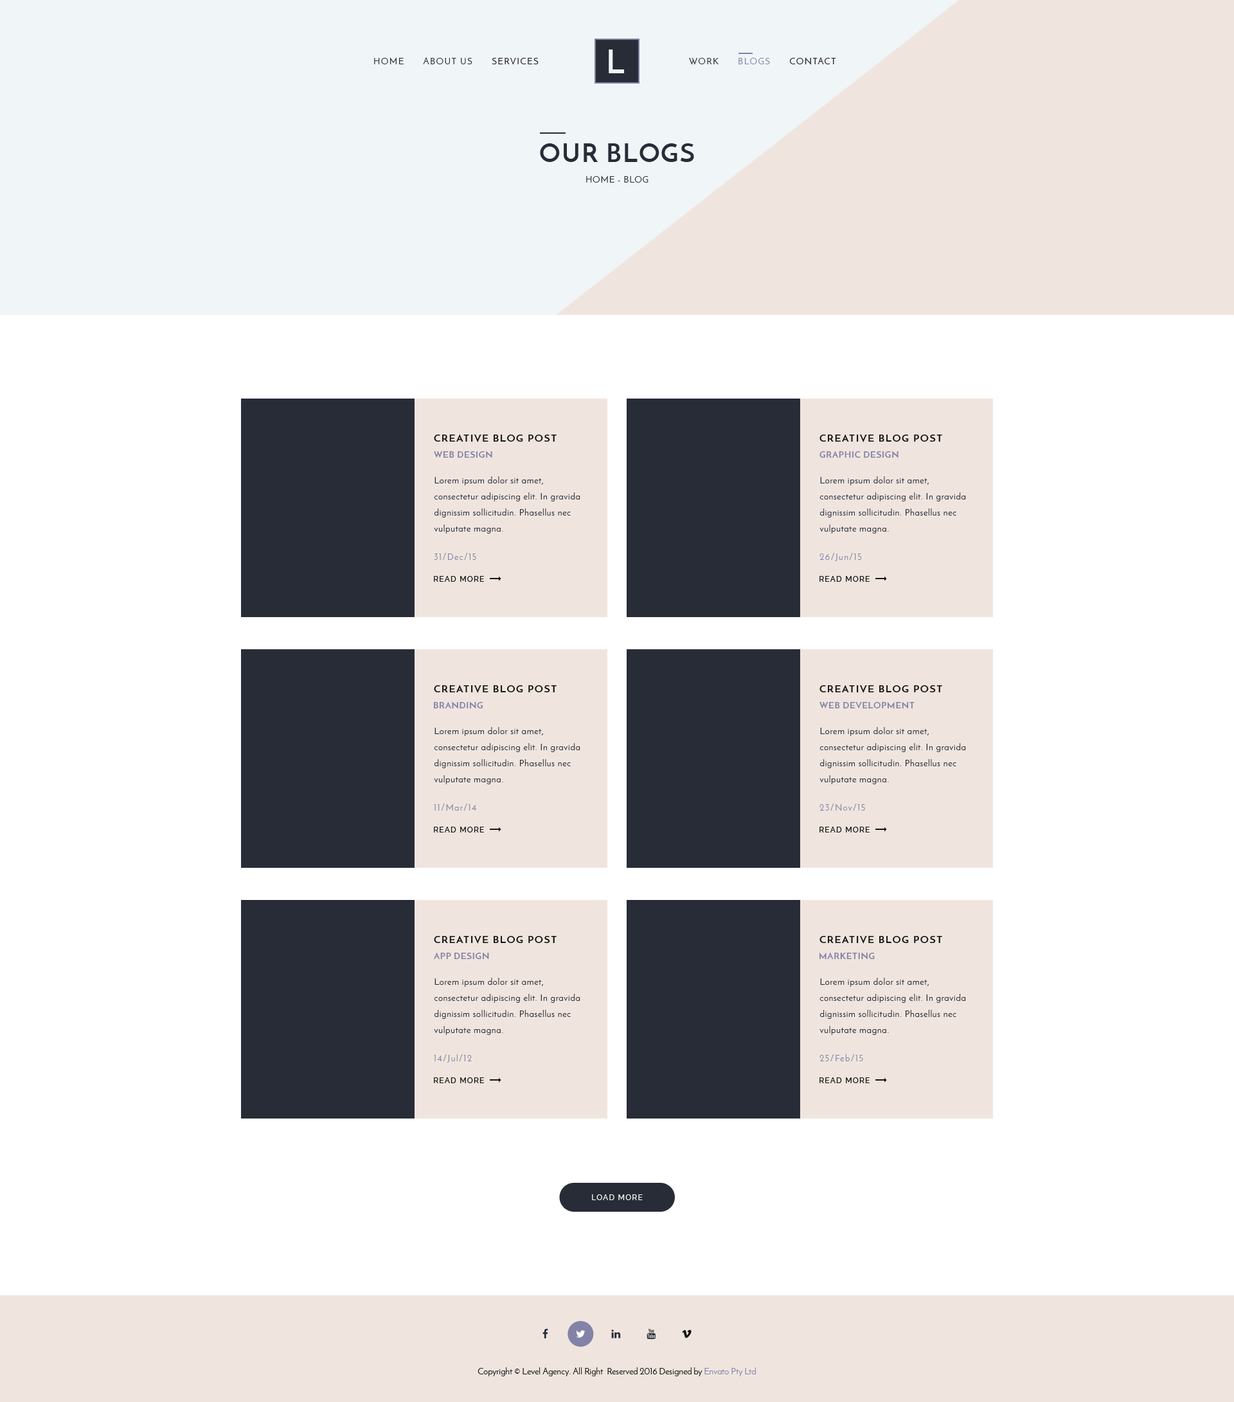
<style>
.page{position:relative;width:1234px;height:1402px;background:#ffffff}
.page>*{position:absolute;margin:0}
.t1{font:32.1px "JosefinSans-Bold";letter-spacing:0.4em;color:#f0f5f7;text-transform:uppercase}
.t2{font:9px "JosefinSans";letter-spacing:0.1em;color:#282c37;text-transform:uppercase}
.t3{font:9px "JosefinSans";letter-spacing:0.1em;color:#141414;text-transform:uppercase}
.t4{font:9px "JosefinSans";letter-spacing:0.1em;color:#8283a7;text-transform:uppercase}
.t5{font:25.7px "JosefinSans-Bold";letter-spacing:0.05em;color:#282c37;text-transform:uppercase}
.t6{font:9px "JosefinSans";letter-spacing:0.05em;color:#282c37;text-transform:uppercase}
.t7{font:10.3px "JosefinSans-Bold";letter-spacing:0.1em;color:#141414;text-transform:uppercase}
.t8{font:9px "JosefinSans-Bold";letter-spacing:0.05em;color:#8283a7;text-transform:uppercase}
.t9{font:9px/16.1px "JosefinSans";letter-spacing:0.05em;color:#282c37}
.t10{font:9px "JosefinSans";letter-spacing:0.1em;color:#8283a7}
.t11{font:7.7px "Raleway-Medium";letter-spacing:0.1em;color:#141414;text-transform:uppercase}
.t12{font:7.7px "Raleway-Medium";letter-spacing:0.1em;color:#ffffff;text-transform:uppercase}
.t13{font:9px "JosefinSans";color:#141414}
.t14{font:9px "JosefinSans";color:#8283a7}
</style>
<div class="page">
<p class="t1" style="left:609px;top:50px;width:15px;height:23px">L</p>
<p class="t2" style="left:374px;top:57px;width:165px;height:8px">HOME      ABOUT US<span class="t3">      SERVICES</span></p>
<p class="t3" style="left:689px;top:57px;width:147px;height:8px"><span class="t2">WORK      </span><span class="t4">BLOGS</span>      CONTACT</p>
<p class="t5" style="left:540px;top:143px;width:154px;height:19px">Our Blogs</p>
<p class="t6" style="left:586px;top:176px;width:63px;height:7px">Home - Blog</p>
<p class="t7" style="left:434px;top:434px;width:123px;height:8px">Creative Blog Post</p>
<p class="t7" style="left:820px;top:434px;width:122px;height:8px">Creative Blog Post</p>
<p class="t8" style="left:434px;top:451px;width:58px;height:7px">Web Design</p>
<p class="t8" style="left:820px;top:451px;width:79px;height:7px">Graphic Design</p>
<p class="t9" style="left:434px;top:476px;width:146px;height:58px">Lorem ipsum dolor sit amet, <br>consectetur adipiscing elit. In gravida dignissim sollicitudin. Phasellus nec vulputate magna.</p>
<p class="t9" style="left:820px;top:476px;width:146px;height:58px">Lorem ipsum dolor sit amet, <br>consectetur adipiscing elit. In gravida dignissim sollicitudin. Phasellus nec vulputate magna.</p>
<p class="t10" style="left:434px;top:553px;width:42px;height:7px">31/Dec/15</p>
<p class="t10" style="left:820px;top:553px;width:42px;height:8px">26/Jun/15</p>
<p class="t11" style="left:434px;top:576px;width:50px;height:6px">Read more</p>
<p class="t11" style="left:820px;top:576px;width:50px;height:6px">Read more</p>
<p class="t7" style="left:434px;top:685px;width:123px;height:8px">Creative Blog Post</p>
<p class="t7" style="left:820px;top:685px;width:122px;height:8px">Creative Blog Post</p>
<p class="t8" style="left:434px;top:701px;width:49px;height:8px">Branding</p>
<p class="t8" style="left:820px;top:701px;width:95px;height:8px">Web Development</p>
<p class="t9" style="left:434px;top:727px;width:146px;height:57px">Lorem ipsum dolor sit amet, <br>consectetur adipiscing elit. In gravida dignissim sollicitudin. Phasellus nec vulputate magna.</p>
<p class="t9" style="left:820px;top:727px;width:146px;height:57px">Lorem ipsum dolor sit amet, <br>consectetur adipiscing elit. In gravida dignissim sollicitudin. Phasellus nec vulputate magna.</p>
<p class="t10" style="left:434px;top:804px;width:42px;height:7px">11/Mar/14</p>
<p class="t10" style="left:820px;top:804px;width:45px;height:7px">23/Nov/15</p>
<p class="t11" style="left:434px;top:827px;width:50px;height:6px">Read more</p>
<p class="t11" style="left:820px;top:827px;width:50px;height:6px">Read more</p>
<p class="t7" style="left:434px;top:935px;width:123px;height:9px">Creative Blog Post</p>
<p class="t7" style="left:820px;top:935px;width:122px;height:9px">Creative Blog Post</p>
<p class="t8" style="left:434px;top:952px;width:55px;height:8px">App Design</p>
<p class="t8" style="left:820px;top:952px;width:55px;height:8px">Marketing</p>
<p class="t9" style="left:434px;top:978px;width:146px;height:57px">Lorem ipsum dolor sit amet, <br>consectetur adipiscing elit. In gravida dignissim sollicitudin. Phasellus nec vulputate magna.</p>
<p class="t9" style="left:820px;top:978px;width:146px;height:57px">Lorem ipsum dolor sit amet, <br>consectetur adipiscing elit. In gravida dignissim sollicitudin. Phasellus nec vulputate magna.</p>
<p class="t10" style="left:434px;top:1054px;width:38px;height:9px">14/Jul/12</p>
<p class="t10" style="left:820px;top:1054px;width:43px;height:7px">25/Feb/15</p>
<p class="t11" style="left:434px;top:1077px;width:50px;height:6px">Read more</p>
<p class="t11" style="left:820px;top:1077px;width:50px;height:6px">Read more</p>
<p class="t12" style="left:592px;top:1194px;width:51px;height:6px">Load more</p>
<p class="t13" style="left:478px;top:1367px;width:278px;height:9px">Copyright © Level Agency. All Right  Reserved 2016 Designed by <span class="t14">Envato Pty Ltd</span></p>
</div>
